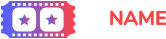
<style>
.page{position:relative;width:166px;height:39px;background:#ffffff}
.page>*{position:absolute;margin:0}
.t1{font:20px "Nunito-ExtraBold";letter-spacing:-0.025em;color:#ff4343}
.t2{font:20px "Nunito-ExtraBold";letter-spacing:-0.025em;color:#ffffff}
</style>
<div class="page">
<p class="t1" style="left:80px;top:10px;width:86px;height:16px"><span class="t2">NO</span>NAME</p>
</div>
